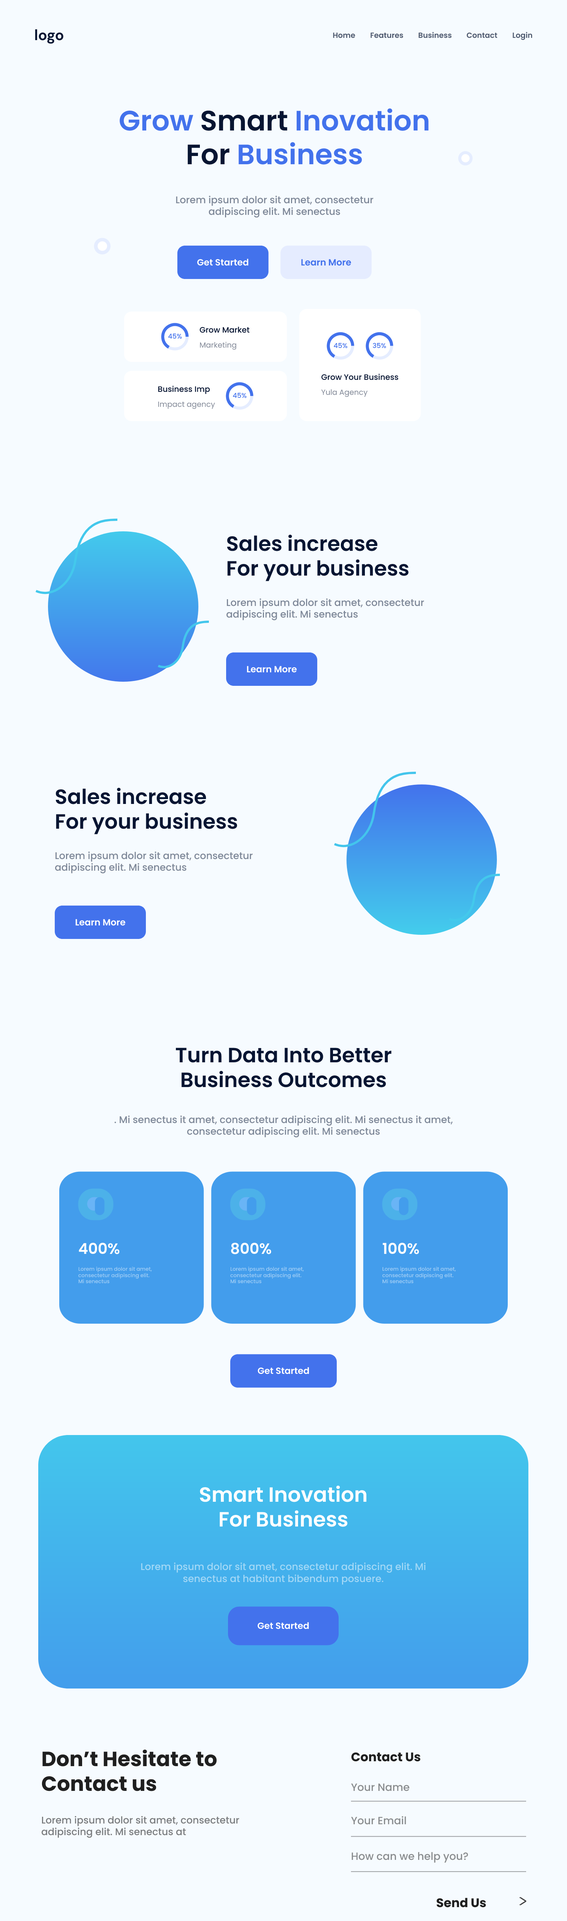
<style>
.page{position:relative;width:567px;height:1921px;background:#f6fbff}
.page>*{position:absolute;margin:0}
.t1{font:15px "DMSans-Bold";color:#071532}
.t2{font:7.5px "Poppins-SemiBold";color:#4f5a6f}
.t3{font:28.1px "Poppins-SemiBold";color:#4372ec}
.t4{font:28.1px "Poppins-SemiBold";color:#071532}
.t5{font:9.8px "Poppins-Medium";color:#7e8898}
.t6{font:9px "Poppins-SemiBold";color:#ffffff}
.t7{font:9px "Poppins-SemiBold";color:#4372ec}
.t8{font:7.9px "Poppins-Medium";color:#071532}
.t9{font:6.8px "Poppins-Medium";color:#4372ec}
.t10{font:7.5px "Poppins-Regular";color:#838a98}
.t11{font:20.6px "Poppins-SemiBold";color:#071532}
.t12{font:15px "Poppins-SemiBold";color:#ffffff}
.t13{font:5.2px "Poppins-Medium";color:#a1cef6}
.t14{font:20.6px "Poppins-SemiBold";color:#ffffff}
.t15{font:9.8px "Poppins-Medium";color:#a1d8f6}
.t16{font:20.6px "Poppins-Bold";color:#1f1f1f}
.t17{font:12.4px "Poppins-Bold";color:#1f1f1f}
.t18{font:10.5px "Poppins-Medium";color:#8a8d8f}
.t19{font:9.8px "Poppins-Medium";color:#7b7d7f}
</style>
<div class="page">
<p class="t1" style="left:35px;top:29px;width:28px;height:15px">logo</p>
<p class="t2" style="left:333px;top:33px;width:22px;height:5px">Home</p>
<p class="t2" style="left:370px;top:33px;width:33px;height:5px">Features</p>
<p class="t2" style="left:418px;top:32px;width:34px;height:6px">Business</p>
<p class="t2" style="left:466px;top:32px;width:31px;height:6px">Contact</p>
<p class="t2" style="left:513px;top:32px;width:19px;height:8px">Login</p>
<p class="t3" style="left:120px;top:108px;width:309px;height:57px;text-align:center">Grow <span class="t4">Smart</span> Inovation <span class="t4"><br>For</span> Business</p>
<p class="t5" style="left:176px;top:195px;width:198px;height:23px;text-align:center">Lorem ipsum dolor sit amet, consectetur adipiscing elit. Mi senectus</p>
<p class="t6" style="left:197px;top:259px;width:52px;height:7px">Get Started</p>
<p class="t7" style="left:301px;top:259px;width:50px;height:7px">Learn More</p>
<p class="t8" style="left:200px;top:327px;width:50px;height:6px">Grow Market</p>
<p class="t9" style="left:168px;top:333px;width:14px;height:6px">45%</p>
<p class="t10" style="left:200px;top:342px;width:36px;height:8px">Marketing</p>
<p class="t9" style="left:334px;top:343px;width:14px;height:5px">45%</p>
<p class="t9" style="left:373px;top:343px;width:13px;height:5px">35%</p>
<p class="t8" style="left:321px;top:374px;width:77px;height:6px">Grow Your Business</p>
<p class="t8" style="left:158px;top:386px;width:52px;height:8px">Business Imp</p>
<p class="t10" style="left:321px;top:389px;width:47px;height:8px">Yula Agency</p>
<p class="t10" style="left:158px;top:402px;width:57px;height:7px">Impact agency</p>
<p class="t9" style="left:233px;top:393px;width:14px;height:5px">45%</p>
<p class="t11" style="left:227px;top:534px;width:182px;height:47px">Sales increase<br>For your business</p>
<p class="t5" style="left:226px;top:598px;width:198px;height:23px">Lorem ipsum dolor sit amet, consectetur adipiscing elit. Mi senectus</p>
<p class="t6" style="left:247px;top:666px;width:50px;height:7px">Learn More</p>
<p class="t11" style="left:56px;top:788px;width:181px;height:46px">Sales increase<br>For your business</p>
<p class="t5" style="left:55px;top:851px;width:198px;height:23px">Lorem ipsum dolor sit amet, consectetur adipiscing elit. Mi senectus</p>
<p class="t6" style="left:75px;top:919px;width:51px;height:7px">Learn More</p>
<p class="t11" style="left:176px;top:1048px;width:216px;height:40px;text-align:center">Turn Data Into Better<br>Business Outcomes</p>
<p class="t5" style="left:114px;top:1115px;width:339px;height:23px;text-align:center">. Mi senectus it amet, consectetur adipiscing elit. Mi senectus it amet, consectetur adipiscing elit. Mi senectus</p>
<p class="t12" style="left:79px;top:1243px;width:41px;height:11px">400%</p>
<p class="t12" style="left:231px;top:1243px;width:40px;height:11px">800%</p>
<p class="t12" style="left:382px;top:1243px;width:37px;height:11px">100%</p>
<p class="t13" style="left:78px;top:1267px;width:74px;height:17px">Lorem ipsum dolor sit amet, consectetur adipiscing elit. Mi senectus</p>
<p class="t13" style="left:230px;top:1267px;width:74px;height:17px">Lorem ipsum dolor sit amet, consectetur adipiscing elit. Mi senectus</p>
<p class="t13" style="left:382px;top:1267px;width:74px;height:17px">Lorem ipsum dolor sit amet, consectetur adipiscing elit. Mi senectus</p>
<p class="t6" style="left:258px;top:1367px;width:51px;height:7px">Get Started</p>
<p class="t14" style="left:200px;top:1485px;width:167px;height:42px;text-align:center">Smart Inovation <br>For Business</p>
<p class="t15" style="left:141px;top:1562px;width:285px;height:23px;text-align:center">Lorem ipsum dolor sit amet, consectetur adipiscing elit. Mi senectus at habitant bibendum posuere.</p>
<p class="t6" style="left:258px;top:1622px;width:51px;height:7px">Get Started</p>
<p class="t16" style="left:42px;top:1749px;width:175px;height:42px">Don’t Hesitate to<br>Contact us</p>
<p class="t17" style="left:351px;top:1752px;width:69px;height:10px">Contact Us</p>
<p class="t18" style="left:351px;top:1784px;width:59px;height:7px">Your Name</p>
<p class="t19" style="left:41px;top:1816px;width:198px;height:22px">Lorem ipsum dolor sit amet, consectetur adipiscing elit. Mi senectus at</p>
<p class="t18" style="left:351px;top:1816px;width:55px;height:9px">Your Email</p>
<p class="t18" style="left:352px;top:1852px;width:116px;height:11px">How can we help you?</p>
<p class="t17" style="left:436px;top:1898px;width:50px;height:10px">Send Us</p>
</div>
